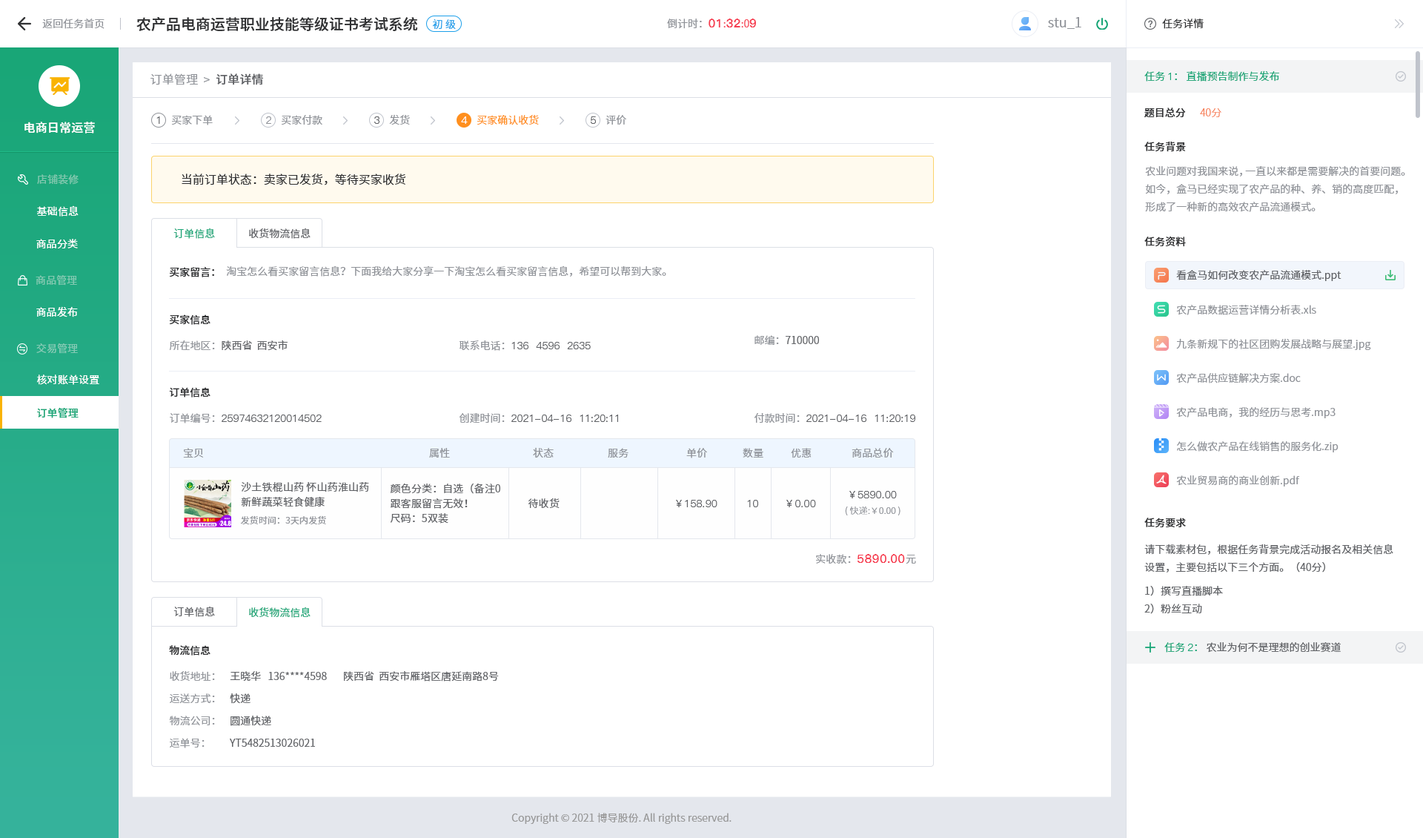
<style>
.page{position:relative;width:1423px;height:838px;background:#ffffff}
.page>*{position:absolute;margin:0}
.t1{font:14.8px "SourceHanSansCN-Medium";color:#303133}
.t2{font:13.3px "SourceHanSansCN-Normal";color:#909399}
.t3{font:10.4px "SourceHanSansCN-Normal";color:#909399}
.t4{font:10.4px "SourceHanSansCN-Normal";color:#1da0ea}
.t5{font:11.9px "PingFang-SC-Heavy";color:#f63f52}
.t6{font:10.4px "SourceHanSansCN-Normal";color:#f63f52}
.t7{font:10.4px "SourceHanSansCN-Normal";color:#303133}
.t8{font:11.9px "SourceHanSansCN-Normal";letter-spacing:0.01em;color:#909399}
.t9{font:11.9px "SourceHanSansCN-Medium";letter-spacing:0.01em;color:#606266}
.t10{font:10.4px "SourceHanSansCN-Normal";color:#19a677}
.t11{font:10.4px "PingFang-SC-Medium";color:#19a677}
.t12{font:10.4px "SourceHanSansCN-Medium";color:#303133}
.t13{font:10.4px "SourceHanSansCN-Light";color:#f67d53}
.t14{font:11.9px "SourceHanSansCN-Medium";letter-spacing:0.01em;color:#ffffff}
.t15{font:10.4px "PingFang-SC-Medium";color:#606266}
.t16{font:10.4px "PingFang-SC-Medium";color:#909399}
.t17{font:10.4px "PingFang-SC-Medium";color:#ffffff}
.t18{font:10.4px "SourceHanSansCN-Normal";color:#ff8f1e}
.t19{font:11.9px "SourceHanSansCN-Normal";color:#303133}
.t20{font:10.4px/17.8px "SourceHanSansCN-Normal";color:#909399}
.t21{font:10.4px "SourceHanSansCN-Regular";letter-spacing:0.01em;color:#81c8af}
.t22{font:10.4px "SourceHanSansCN-Normal";letter-spacing:0.01em;color:#ffffff}
.t23{font:10.4px "SourceHanSansSC-Normal";color:#1aa678}
.t24{font:10.4px "SourceHanSansSC-Normal";color:#606266}
.t25{font:10.4px "SourceHanSansSC-Medium";color:#303133}
.t26{font:10.4px "SourceHanSansSC-Normal";color:#909399}
.t27{font:10.4px "SourceHanSansCN-Normal";color:#606266}
.t28{font:10.4px "SourceHanSansCN-Regular";letter-spacing:0.01em;color:#82cab2}
.t29{font:10.4px "SourceHanSansCN-Regular";letter-spacing:0.01em;color:#ffffff}
.t30{font:10.4px "SourceHanSansCN-Regular";letter-spacing:0.01em;color:#83cab4}
.t31{font:10.4px "SourceHanSansCN-Medium";letter-spacing:0.01em;color:#19a677}
.t32{font:10.4px "SourceHanSansCN-Normal";letter-spacing:0.01em;color:#909399}
.t33{font:10.4px/14.8px "SourceHanSansCN-Normal";letter-spacing:0.01em;color:#606266}
.t34{font:10.4px "PingFang-SC-Medium";letter-spacing:0.01em;color:#606266}
.t35{font:10.4px "SourceHanSansCN-Normal";letter-spacing:0.01em;color:#606266}
.t36{font:8.9px "SourceHanSansCN-Light";letter-spacing:0.01em;color:#909399}
.t37{font:8.9px "SourceHanSansCN-Normal";letter-spacing:0.01em;color:#909399}
.t38{font:10.4px/17.8px "SourceHanSansCN-Normal";color:#606266}
.t39{font:11.9px "PingFang-SC-Bold";letter-spacing:0.01em;color:#f63f52}
.t40{font:10.4px "SourceHanSansSC-Normal";color:#19a677}
.t41{font:10.4px "PingFang-SC-Medium";color:#1aa678}
.t42{font:10.4px "SourceHanSansCN-Normal";color:#1aa678}
.t43{font:10.4px/22.2px "SourceHanSansSC-Normal";color:#909399}
.t44{font:10.4px/22.2px "SourceHanSansSC-Normal";color:#606266}
.t45{font:10.4px "SourceHanSansCN-Normal";color:#999999}
</style>
<div class="page">
<p class="t1" style="left:136px;top:16px;width:282px;height:15px">农产品电商运营职业技能等级证书考试系统</p>
<p class="t2" style="left:1048px;top:17px;width:34px;height:12px">stu_1</p>
<p class="t3" style="left:42px;top:19px;width:63px;height:10px">返回任务首页</p>
<p class="t4" style="left:432px;top:19px;width:24px;height:11px">初 级</p>
<p class="t3" style="left:667px;top:19px;width:89px;height:10px">倒计时：<span class="t5">01</span><span class="t6">:</span><span class="t5">32</span><span class="t6">:0</span><span class="t5">9</span></p>
<p class="t7" style="left:1162px;top:19px;width:42px;height:10px">任务详情</p>
<p class="t8" style="left:150px;top:73px;width:113px;height:12px">订单管理  &gt;<span class="t9">  订单详情</span></p>
<p class="t10" style="left:1145px;top:70px;width:135px;height:12px">任务 <span class="t11">1</span>： 直播预告制作与发布</p>
<p class="t12" style="left:1145px;top:107px;width:41px;height:11px">题目总分</p>
<p class="t13" style="left:1200px;top:108px;width:22px;height:9px">40分</p>
<p class="t14" style="left:24px;top:122px;width:71px;height:11px">电商日常运营</p>
<p class="t15" style="left:156px;top:116px;width:4px;height:8px">1</p>
<p class="t3" style="left:171px;top:115px;width:42px;height:10px">买家下单</p>
<p class="t16" style="left:266px;top:116px;width:5px;height:8px">2</p>
<p class="t3" style="left:281px;top:115px;width:41px;height:10px">买家付款</p>
<p class="t15" style="left:374px;top:116px;width:6px;height:8px">3</p>
<p class="t3" style="left:389px;top:114px;width:21px;height:11px">发货</p>
<p class="t17" style="left:461px;top:116px;width:7px;height:8px">4</p>
<p class="t18" style="left:477px;top:115px;width:62px;height:10px">买家确认收货</p>
<p class="t15" style="left:591px;top:116px;width:5px;height:8px">5</p>
<p class="t3" style="left:606px;top:115px;width:20px;height:10px">评价</p>
<p class="t12" style="left:1145px;top:141px;width:41px;height:11px">任务背景</p>
<p class="t19" style="left:182px;top:173px;width:224px;height:12px">当前订单状态：卖家已发货，等待买家收货</p>
<p class="t20" style="left:1145px;top:166px;width:261px;height:46px">农业问题对我国来说，一直以来都是需要解决的首要问题。如今，盒马已经实现了农产品的种、养、销的高度匹配，形成了一种新的高效农产品流通模式。</p>
<p class="t21" style="left:37px;top:174px;width:42px;height:11px">店铺装修</p>
<p class="t22" style="left:37px;top:205px;width:42px;height:11px">基础信息</p>
<p class="t23" style="left:173px;top:228px;width:42px;height:11px">订单信息</p>
<p class="t24" style="left:249px;top:228px;width:62px;height:11px">收货物流信息</p>
<p class="t22" style="left:36px;top:239px;width:42px;height:9px">商品分类</p>
<p class="t12" style="left:1145px;top:236px;width:41px;height:11px">任务资料</p>
<p class="t25" style="left:169px;top:267px;width:45px;height:10px">买家留言：</p>
<p class="t26" style="left:226px;top:265px;width:440px;height:12px">淘宝怎么看买家留言信息？下面我给大家分享一下淘宝怎么看买家留言信息，希望可以帮到大家。</p>
<p class="t27" style="left:1177px;top:270px;width:165px;height:11px">看盒马如何改变农产品流通模式.ppt</p>
<p class="t28" style="left:36px;top:275px;width:41px;height:10px">商品管理</p>
<p class="t3" style="left:1177px;top:305px;width:140px;height:10px">农产品数据运营详情分析表.xls</p>
<p class="t29" style="left:36px;top:306px;width:42px;height:11px">商品发布</p>
<p class="t25" style="left:169px;top:314px;width:42px;height:11px">买家信息</p>
<p class="t24" style="left:169px;top:340px;width:119px;height:11px"><span class="t26">所在地区：</span>陕西省  西安市</p>
<p class="t15" style="left:460px;top:340px;width:131px;height:11px"><span class="t26">联系电话：</span>136  4596  2635</p>
<p class="t24" style="left:755px;top:335px;width:64px;height:10px"><span class="t26">邮编：</span>710000</p>
<p class="t3" style="left:1177px;top:338px;width:195px;height:12px">九条新规下的社区团购发展战略与展望.jpg</p>
<p class="t30" style="left:36px;top:343px;width:42px;height:11px">交易管理</p>
<p class="t22" style="left:37px;top:374px;width:62px;height:11px">核对账单设置</p>
<p class="t3" style="left:1177px;top:373px;width:124px;height:10px">农产品供应链解决方案.doc</p>
<p class="t25" style="left:169px;top:387px;width:42px;height:10px">订单信息</p>
<p class="t31" style="left:37px;top:407px;width:42px;height:11px">订单管理</p>
<p class="t15" style="left:170px;top:413px;width:152px;height:10px"><span class="t26">订单编号：</span>25974632120014502</p>
<p class="t15" style="left:459px;top:413px;width:159px;height:10px"><span class="t26">创建时间：</span>2021-04-16  11:20:11</p>
<p class="t15" style="left:755px;top:413px;width:161px;height:10px"><span class="t26">付款时间：</span>2021-04-16  11:20:19</p>
<p class="t3" style="left:1177px;top:407px;width:159px;height:11px">农产品电商，我的经历与思考.mp3</p>
<p class="t32" style="left:183px;top:448px;width:21px;height:9px">宝贝</p>
<p class="t32" style="left:429px;top:448px;width:21px;height:10px">属性</p>
<p class="t32" style="left:533px;top:447px;width:21px;height:10px">状态</p>
<p class="t32" style="left:608px;top:448px;width:21px;height:9px">服务</p>
<p class="t32" style="left:686px;top:448px;width:21px;height:10px">单价</p>
<p class="t32" style="left:743px;top:448px;width:21px;height:9px">数量</p>
<p class="t32" style="left:791px;top:448px;width:21px;height:10px">优惠</p>
<p class="t32" style="left:852px;top:448px;width:42px;height:9px">商品总价</p>
<p class="t3" style="left:1177px;top:441px;width:162px;height:11px">怎么做农产品在线销售的服务化.zip</p>
<p class="t33" style="left:241px;top:482px;width:128px;height:25px">沙土铁棍山药 怀山药淮山药新鲜蔬菜轻食健康</p>
<p class="t33" style="left:390px;top:483px;width:110px;height:40px">颜色分类：自选（备注0<br>跟客服留言无效！<br>尺码：5双装</p>
<p class="t3" style="left:1177px;top:475px;width:123px;height:11px">农业贸易商的商业创新.pdf</p>
<p class="t34" style="left:850px;top:491px;width:47px;height:7px">￥5890.00</p>
<p class="t35" style="left:529px;top:498px;width:31px;height:10px">待收货</p>
<p class="t34" style="left:676px;top:500px;width:42px;height:7px">￥158.90</p>
<p class="t34" style="left:747px;top:500px;width:11px;height:7px">10</p>
<p class="t34" style="left:787px;top:500px;width:29px;height:7px">￥0.00</p>
<p class="t36" style="left:845px;top:506px;width:56px;height:9px">( 快递:￥0.00 )</p>
<p class="t37" style="left:240px;top:515px;width:86px;height:10px">发货时间：3天内发货</p>
<p class="t12" style="left:1145px;top:517px;width:41px;height:11px">任务要求</p>
<p class="t38" style="left:1145px;top:543px;width:249px;height:71px">请下载素材包，根据任务背景完成活动报名及相关信息设置，主要包括以下三个方面。（40分）<br>1）撰写直播脚本<br>2）粉丝互动</p>
<p class="t39" style="left:816px;top:554px;width:100px;height:9px"><span class="t32">实收款：</span>5890.00<span class="t32">元</span></p>
<p class="t24" style="left:173px;top:606px;width:42px;height:11px">订单信息</p>
<p class="t40" style="left:249px;top:606px;width:62px;height:12px">收货物流信息</p>
<p class="t25" style="left:169px;top:645px;width:42px;height:10px">物流信息</p>
<p class="t27" style="left:1165px;top:642px;width:176px;height:10px"><span class="t10">任务 </span><span class="t41">2</span><span class="t42">：</span> 农业为何不是理想的创业赛道</p>
<p class="t43" style="left:169px;top:671px;width:46px;height:77px">收货地址：<br>运送方式：<br>物流公司：<br>运单号：</p>
<p class="t44" style="left:230px;top:670px;width:269px;height:77px">王晓华   136****4598       陕西省  西安市雁塔区唐延南路8号<br>快递<br>圆通快递<br>YT5482513026021</p>
<p class="t45" style="left:512px;top:813px;width:220px;height:11px">Copyright © 2021 博导股份. All rights reserved.</p>
</div>
